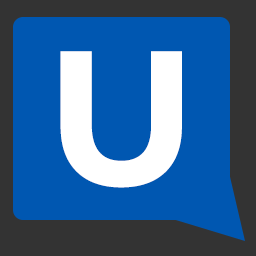
<style>
.page{position:relative;width:256px;height:256px;background:#0057b1}
.page>*{position:absolute;margin:0}
.t1{font:191px "Montserrat-Bold";color:#ffffff}
</style>
<div class="page">
<p class="t1" style="left:60px;top:51px;width:122px;height:137px">U</p>
</div>
